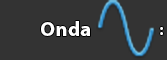
<style>
.page{position:relative;width:167px;height:60px;background:#333333}
.page>*{position:absolute;margin:0}
.t1{font:20.9px "MyriadPro-Bold";color:#ffffff}
.t2{font:20.9px "MyriadPro-Bold";color:#000000}
.t3{font:12px "MyriadPro-Bold";color:#ffffff}
</style>
<div class="page">
<p class="t1" style="left:41px;top:21px;width:49px;height:15px"><span class="t2"><br></span><br>Onda</p>
<p class="t3" style="left:160px;top:27px;width:3px;height:8px">:</p>
</div>
